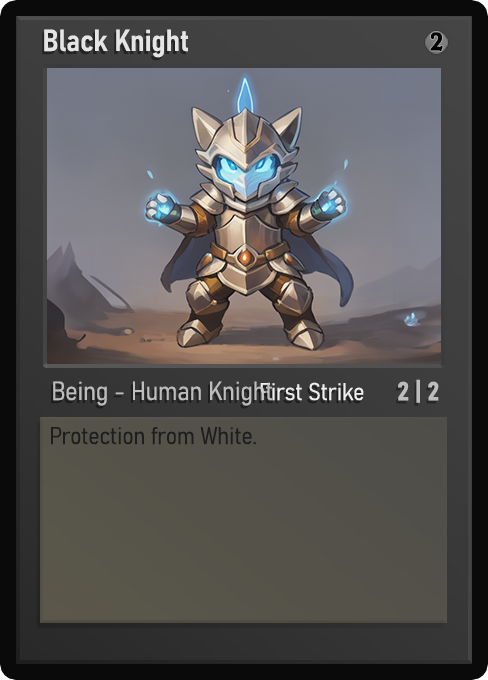
<style>
.page{position:relative;width:488px;height:680px}
.page>*{position:absolute;margin:0}
.t1{font:30px "Bahnschrift-SemiBoldSemiCondensed";color:#f2f2f2;font-weight:bold}
.t2{font:25px "WTRRoycroft";color:#000000;font-weight:bold;scale:1.09 1}
.t3{font:26px "Bahnschrift-LightSemiCondensed";color:#c8c8c8;font-weight:bold}
.t4{font:24px "Bahnschrift-LightSemiCondensed";color:#f0efef;font-weight:bold}
.t5{font:26px "Bahnschrift-BoldSemiCondensed";color:#bdbdbd;font-weight:bold}
.t6{font:24px "Bahnschrift-LightSemiCondensed";color:#1e1e1e;font-weight:bold}
</style>
<div class="page">
<p class="t1" style="left:44px;top:29px;width:144px;height:29px;opacity:0.9">Black Knight</p>
<p class="t2" style="left:430px;top:32px;width:13px;height:19px">2</p>
<p class="t3" style="left:53px;top:381px;width:219px;height:25px;opacity:0.9">Being - Human Knight</p>
<p class="t4" style="left:260px;top:382px;width:104px;height:19px">First Strike</p>
<p class="t5" style="left:398px;top:379px;width:41px;height:24px">2 | 2</p>
<p class="t6" style="left:51px;top:427px;width:205px;height:18px">Protection from White.</p>
</div>
